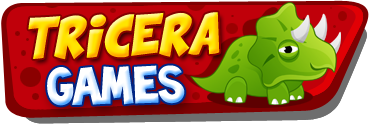
<style>
.page{position:relative;width:374px;height:124px}
.page>*{position:absolute;margin:0}
.t1{font:28.7px "ComixLoud";text-transform:uppercase;font-style:italic}
.t2{font:48.4px "Toonish";color:#ffffff;text-transform:uppercase}
</style>
<div class="page">
<p class="t1" style="left:28px;top:12px;width:192px;height:48px;rotate:-1deg">TRICERA</p>
<p class="t2" style="left:47px;top:65px;width:138px;height:41px;rotate:-1deg">Games</p>
</div>
